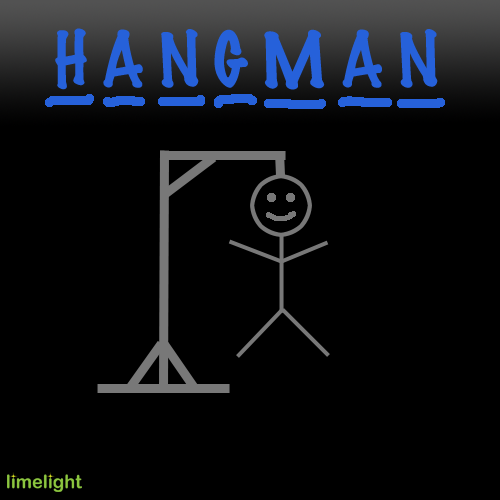
<style>
.page{position:relative;width:500px;height:500px;background:#000000}
.page>*{position:absolute;margin:0}
.t1{font:69px "MarkerFelt-Thin";letter-spacing:0.2em;color:#2661da}
</style>
<div class="page">
<p class="t1" style="left:55px;top:28px;width:383px;height:62px">HANGMAN</p>
</div>
